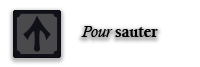
<style>
.page{position:relative;width:200px;height:67px;background:#ffffff}
.page>*{position:absolute;margin:0}
.t1{font:16px "CalisMTBol";color:#000000}
.t2{font:16px "CalistoMT-Italic";color:#000000}
</style>
<div class="page">
<p class="t1" style="left:81px;top:26px;width:77px;height:11px"><span class="t2">Pour </span>sauter</p>
</div>
